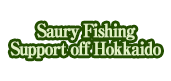
<style>
.page{position:relative;width:171px;height:81px;background:#ffffff}
.page>*{position:absolute;margin:0}
.t1{font:18px/18px "RyuminPro-ExBold";letter-spacing:-0.08em;color:#e1f1c3;font-weight:bold;scale:0.9 1}
</style>
<div class="page">
<p class="t1" style="left:10px;top:23px;width:151px;height:36px;text-align:center">Saury Fishing<br>Support off Hokkaido</p>
</div>
